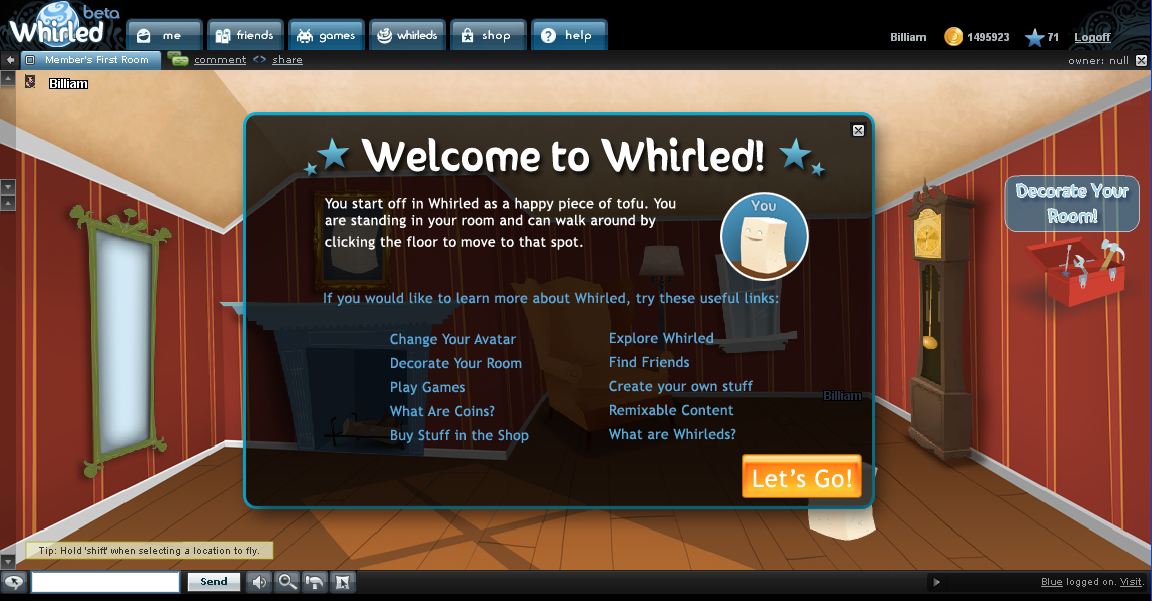
<style>
.page{position:relative;width:1152px;height:601px}
.page>*{position:absolute;margin:0}
.t1{font:36px "SunnySide";letter-spacing:0.025em;color:#ffffff}
.t2{font:14px "TrebuchetMS";letter-spacing:0.025em;color:#ffffff}
.t3{font:14px "TrebuchetMS";letter-spacing:0.025em;color:#5aa8da}
.t4{font:14px/24px "TrebuchetMS";letter-spacing:0.025em;color:#5aa8da}
.t5{font:24px "TrebuchetMS";letter-spacing:0.025em;color:#fefefe}
</style>
<div class="page">
<p class="t1" style="left:361px;top:137px;width:403px;height:35px">Welcome to Whirled!</p>
<p class="t2" style="left:325px;top:197px;width:351px;height:53px">You start off in Whirled as a happy piece of tofu. You are standing in your room and can walk around by clicking the floor to move to that spot.</p>
<p class="t3" style="left:324px;top:292px;width:455px;height:14px">If you would like to learn more about Whirled, try these useful links:</p>
<p class="t4" style="left:390px;top:333px;width:139px;height:110px">Change Your Avatar<br>Decorate Your Room<br>Play Games<br>What Are Coins?<br>Buy Stuff in the Shop</p>
<p class="t4" style="left:609px;top:332px;width:145px;height:108px">Explore Whirled<br>Find Friends<br>Create your own stuff<br>Remixable Content<br>What are Whirleds?</p>
<p class="t5" style="left:753px;top:469px;width:99px;height:19px">Let’s Go!</p>
</div>
